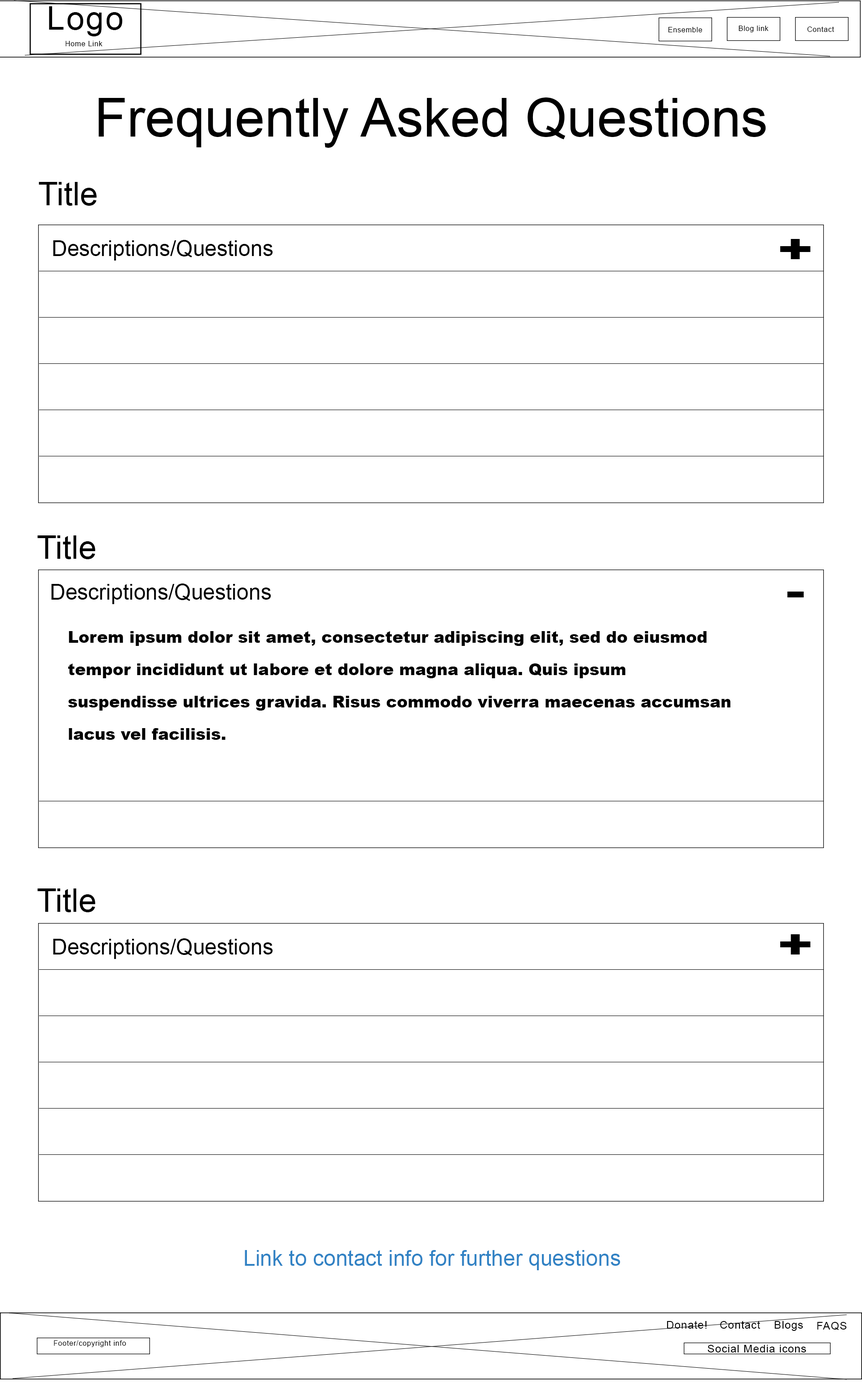
<style>
.page{position:relative;width:862px;height:1383px;background:#ffffff}
.page>*{position:absolute;margin:0}
.t1{font:32.3px "ArialMT";letter-spacing:0.05em;color:#000000}
.t2{font:7.2px "ArialMT";letter-spacing:0.05em;color:#000000}
.t3{font:53.9px "ArialMT";color:#000000}
.t4{font:32.3px "ArialMT";color:#000000}
.t5{font:21.6px "ArialMT";color:#000000}
.t6{font:37.3px "Arial-Black";color:#000000;scale:1.52 1}
.t7{font:16.2px/32.3px "Arial-Black";color:#000000}
.t8{font:21.6px "ArialMT";color:#3182c4}
.t9{font:10.8px "ArialMT";letter-spacing:0.05em;color:#000000}
</style>
<div class="page">
<p class="t1" style="left:49px;top:6px;width:74px;height:30px">Logo</p>
<p class="t2" style="left:668px;top:27px;width:34px;height:5px">Ensemble</p>
<p class="t2" style="left:739px;top:26px;width:30px;height:6px">Blog link</p>
<p class="t2" style="left:808px;top:26px;width:26px;height:6px">Contact</p>
<p class="t2" style="left:66px;top:41px;width:36px;height:5px">Home Link</p>
<p class="t3" style="left:98px;top:97px;width:668px;height:51px">Frequently Asked Questions</p>
<p class="t4" style="left:39px;top:182px;width:58px;height:24px">Title</p>
<p class="t5" style="left:53px;top:240px;width:220px;height:20px">Descriptions/Questions</p>
<p class="t6" style="left:780px;top:239px;width:31px;height:20px">+</p>
<p class="t4" style="left:37px;top:535px;width:59px;height:24px">Title</p>
<p class="t5" style="left:51px;top:583px;width:220px;height:21px">Descriptions/Questions</p>
<p class="t6" style="left:787px;top:591px;width:17px;height:6px">-</p>
<p class="t7" style="left:68px;top:631px;width:663px;height:109px">Lorem ipsum dolor sit amet, consectetur adipiscing elit, sed do eiusmod tempor incididunt ut labore et dolore magna aliqua. Quis ipsum suspendisse ultrices gravida. Risus commodo viverra maecenas accumsan lacus vel facilisis.</p>
<p class="t4" style="left:37px;top:888px;width:59px;height:24px">Title</p>
<p class="t5" style="left:53px;top:938px;width:220px;height:21px">Descriptions/Questions</p>
<p class="t6" style="left:780px;top:934px;width:31px;height:20px">+</p>
<p class="t8" style="left:245px;top:1250px;width:376px;height:20px">Link to contact info for further questions</p>
<p class="t9" style="left:667px;top:1320px;width:40px;height:8px">Donate!</p>
<p class="t9" style="left:720px;top:1320px;width:40px;height:8px">Contact</p>
<p class="t9" style="left:775px;top:1321px;width:28px;height:10px">Blogs</p>
<p class="t9" style="left:817px;top:1322px;width:30px;height:8px">FAQS</p>
<p class="t2" style="left:54px;top:1340px;width:72px;height:7px">Footer/copyright info</p>
<p class="t9" style="left:708px;top:1345px;width:99px;height:7px">Social Media icons</p>
</div>
